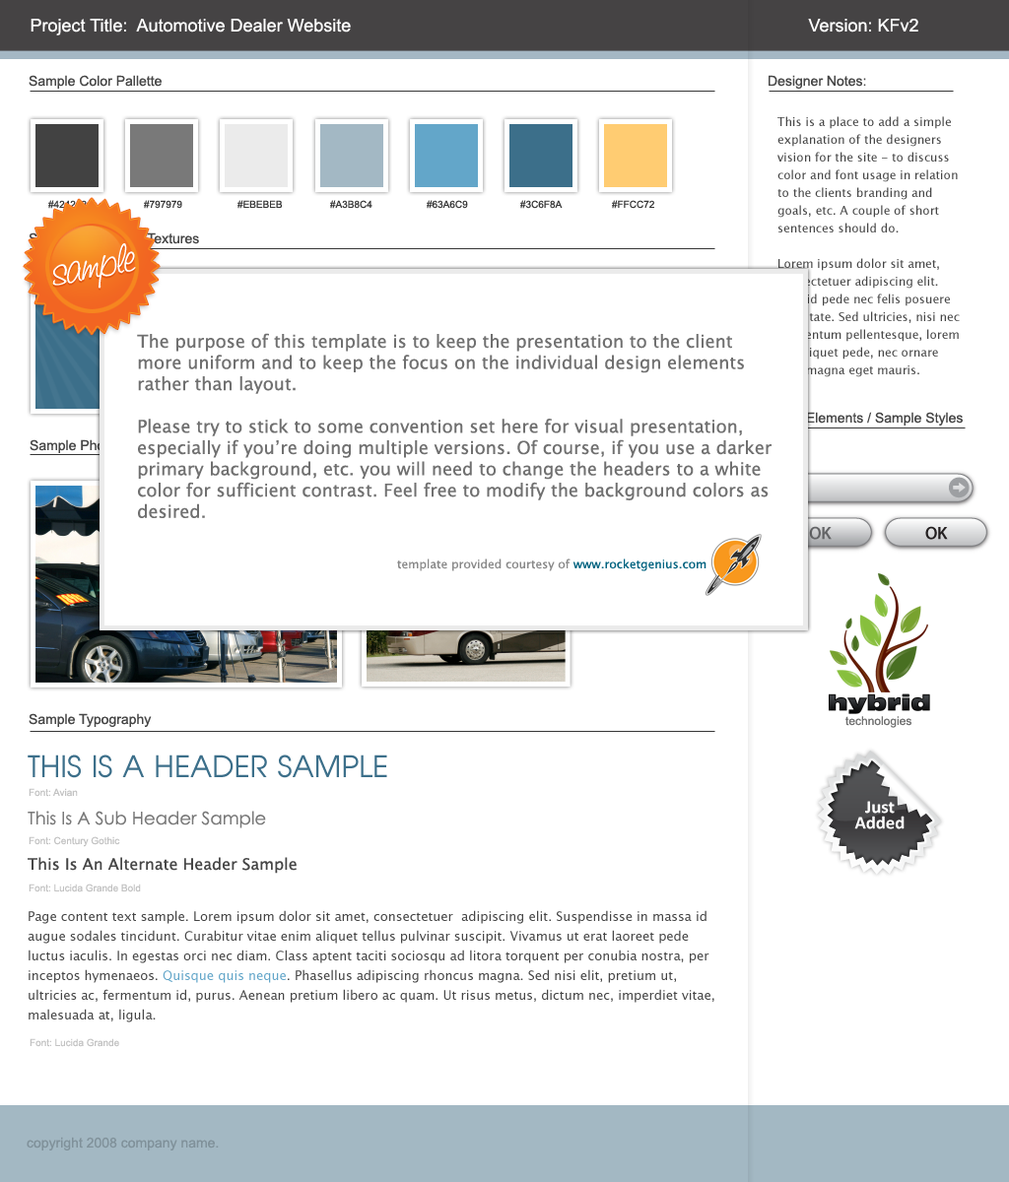
<style>
.page{position:relative;width:1009px;height:1182px;background:#ffffff}
.page>*{position:absolute;margin:0}
.t1{font:17.7px "ArialMT";color:#ffffff}
.t2{font:13.8px "ArialMT";color:#464646}
.t3{font:11.8px/17.7px "LucidaGrande";color:#464646}
.t4{font:9.9px "ArialMT";text-transform:uppercase}
.t5{font:9.9px "ArialMT";color:#363636;text-transform:uppercase}
.t6{font:13.8px "ArialMT"}
.t7{font:29.6px "AvianRegular";color:#3c6f8a;text-transform:uppercase}
.t8{font:9.9px "ArialMT";color:#c2c2c2}
.t9{font:17.7px "CenturyGothic";color:#797979}
.t10{font:15.8px "LucidaGrande";color:#464646}
.t11{font:12.8px/19.7px "LucidaGrande";color:#464646}
.t12{font:12.8px/19.7px "LucidaGrande";color:#63a6c9}
.t13{font:13.8px "ArialMT";color:#80919a}
</style>
<div class="page">
<p class="t1" style="left:31px;top:19px;width:320px;height:16px">Project Title:  Automotive Dealer Website</p>
<p class="t1" style="left:808px;top:19px;width:110px;height:14px">Version: KFv2</p>
<p class="t2" style="left:29px;top:75px;width:133px;height:14px">Sample Color Pallette</p>
<p class="t2" style="left:768px;top:75px;width:98px;height:14px">Designer Notes:</p>
<p class="t3" style="left:777px;top:116px;width:182px;height:261px">This is a place to add a simple explanation of the designers vision for the site - to discuss color and font usage in relation to the clients branding and goals, etc. A couple of short sentences should do.<br><br>Lorem ipsum dolor sit amet, consectetuer adipiscing elit. Duis id pede nec felis posuere vulputate. Sed ultricies, nisi nec elementum pellentesque, lorem elit aliquet pede, nec ornare ante magna eget mauris.</p>
<p class="t4" style="left:48px;top:200px;width:39px;height:9px">#424242</p>
<p class="t5" style="left:144px;top:200px;width:38px;height:9px">#797979</p>
<p class="t5" style="left:237px;top:200px;width:46px;height:9px">#ebebeb</p>
<p class="t5" style="left:330px;top:200px;width:42px;height:9px">#a3b8c4</p>
<p class="t5" style="left:427px;top:200px;width:41px;height:9px">#63a6c9</p>
<p class="t5" style="left:520px;top:200px;width:42px;height:9px">#3c6f8a</p>
<p class="t5" style="left:612px;top:200px;width:42px;height:9px">#ffcc72</p>
<p class="t6" style="left:29px;top:232px;width:170px;height:14px">Sample Patterns &amp; Textures</p>
<p class="t2" style="left:767px;top:412px;width:195px;height:14px">Other Elements / Sample Styles</p>
<p class="t6" style="left:30px;top:439px;width:215px;height:14px">Sample Photography &amp; Illustrations</p>
<p class="t2" style="left:29px;top:713px;width:123px;height:14px">Sample Typography</p>
<p class="t7" style="left:28px;top:755px;width:359px;height:23px">This is a Header sample</p>
<p class="t8" style="left:29px;top:788px;width:49px;height:9px">Font: Avian</p>
<p class="t9" style="left:28px;top:811px;width:238px;height:17px">This Is A Sub Header Sample</p>
<p class="t8" style="left:29px;top:836px;width:91px;height:11px">Font: Century Gothic</p>
<p class="t10" style="left:28px;top:857px;width:269px;height:17px">This Is An Alternate Header Sample</p>
<p class="t8" style="left:29px;top:884px;width:112px;height:8px">Font: Lucida Grande Bold</p>
<p class="t11" style="left:28px;top:910px;width:686px;height:113px">Page content text sample. Lorem ipsum dolor sit amet, consectetuer  adipiscing elit. Suspendisse in massa id augue sodales tincidunt. Curabitur vitae enim aliquet tellus pulvinar suscipit. Vivamus ut erat laoreet pede luctus iaculis. In egestas orci nec diam. Class aptent taciti sociosqu ad litora torquent per conubia nostra, per inceptos hymenaeos. <span class="t12">Quisque quis neque</span>. Phasellus adipiscing rhoncus magna. Sed nisi elit, pretium ut, ultricies ac, fermentum id, purus. Aenean pretium libero ac quam. Ut risus metus, dictum nec, imperdiet vitae, malesuada at, ligula.</p>
<p class="t8" style="left:30px;top:1038px;width:89px;height:9px">Font: Lucida Grande</p>
<p class="t13" style="left:27px;top:1137px;width:192px;height:14px">copyright 2008 company name.</p>
</div>
